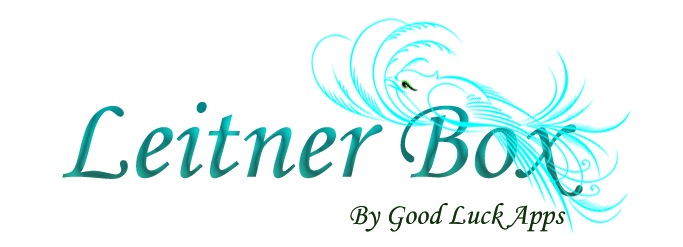
<style>
.page{position:relative;width:683px;height:247px;background:#ffffff}
.page>*{position:absolute;margin:0}
.t1{font:120px "MonotypeCorsiva"}
.t2{font:30px "MonotypeCorsiva";color:#112f0c}
</style>
<div class="page">
<p class="t1" style="left:62px;top:102px;width:521px;height:95px">Leitner Box</p>
<p class="t2" style="left:350px;top:203px;width:216px;height:29px">By Good Luck Apps</p>
</div>
